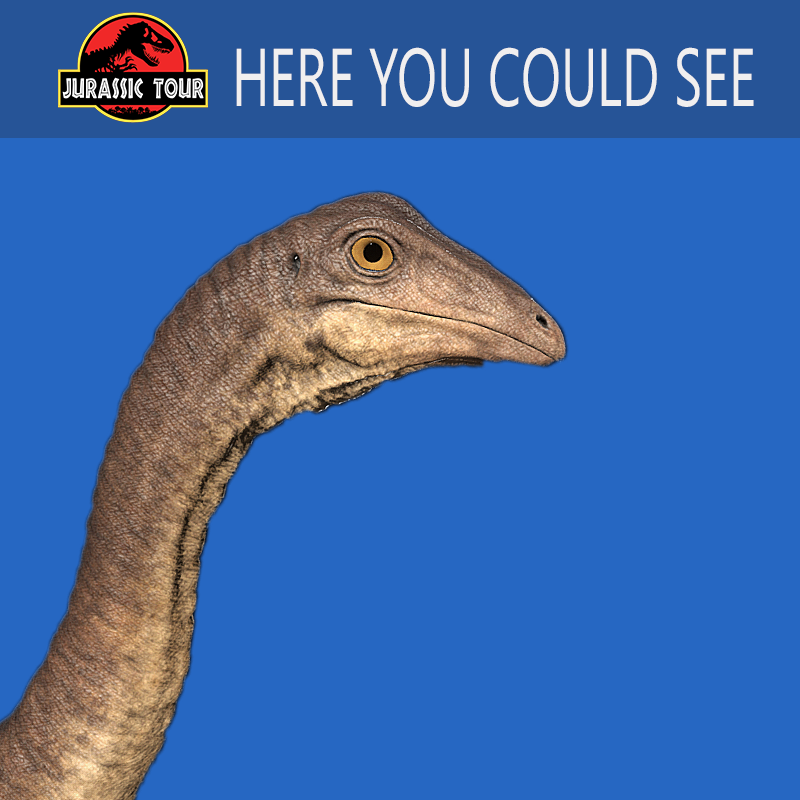
<style>
.page{position:relative;width:800px;height:800px;background:#2667c2}
.page>*{position:absolute;margin:0}
.t1{font:81.7px "SegoeUISymbol";color:#f1efef;scale:0.65 1}
</style>
<div class="page">
<p class="t1" style="left:236px;top:47px;width:518px;height:60px">HERE YOU COULD SEE</p>
</div>
